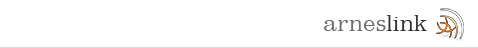
<style>
.page{position:relative;width:478px;height:48px;background:#ffffff}
.page>*{position:absolute;margin:0}
.t1{font:24px "ImpressumTEE-Ligh";color:#6d6e70}
.t2{font:24px "ImpressumTEE-Ligh";color:#303031}
</style>
<div class="page">
<p class="t1" style="left:324px;top:15px;width:103px;height:16px">arnes<span class="t2">link</span></p>
</div>
